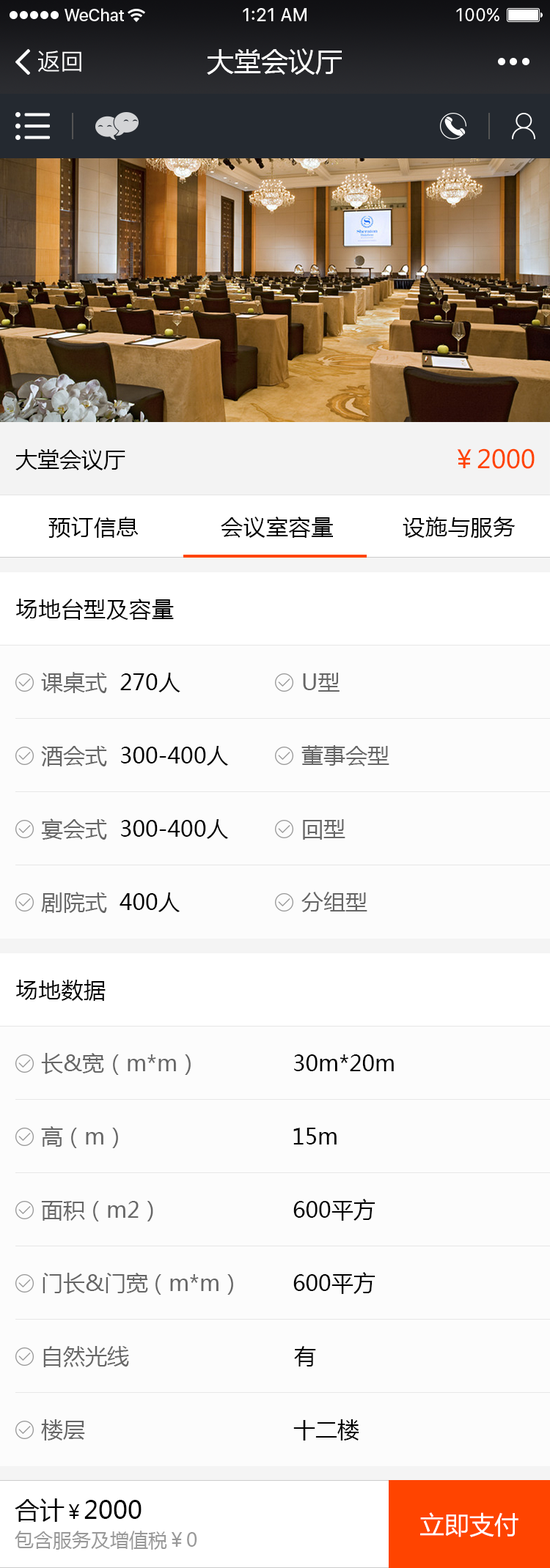
<style>
.page{position:relative;width:550px;height:1568px;background:#fcfcfc}
.page>*{position:absolute;margin:0}
.t1{font:23.4px "PingFangSC-Regular";color:#ffffff}
.t2{font:27.1px "MicrosoftYaHei";color:#ffffff}
.t3{font:22px "MicrosoftYaHei";color:#000000}
.t4{font:24.9px "MicrosoftYaHei";color:#ff4400}
.t5{font:22px "MicrosoftYaHei";letter-spacing:0.03em;color:#000000}
.t6{font:22px "MicrosoftYaHei";color:#666666}
.t7{font:19.1px/33px "MicrosoftYaHei";color:#999999}
.t8{font:24.9px/33px "MicrosoftYaHei";color:#000000}
.t9{font:19.1px/33px "MicrosoftYaHei";color:#000000}
.t10{font:24.9px "MicrosoftYaHei";color:#ffffff}
</style>
<div class="page">
<p class="t1" style="left:38px;top:51px;width:43px;height:22px">返回</p>
<p class="t2" style="left:207px;top:48px;width:134px;height:27px">大堂会议厅</p>
<p class="t3" style="left:15px;top:449px;width:110px;height:21px">大堂会议厅</p>
<p class="t4" style="left:456px;top:448px;width:78px;height:21px">￥2000</p>
<p class="t5" style="left:48px;top:517px;width:90px;height:21px">预订信息</p>
<p class="t5" style="left:221px;top:517px;width:112px;height:21px">会议室容量</p>
<p class="t5" style="left:402px;top:517px;width:113px;height:21px">设施与服务</p>
<p class="t5" style="left:16px;top:599px;width:158px;height:21px">场地台型及容量</p>
<p class="t6" style="left:41px;top:672px;width:66px;height:21px">课桌式</p>
<p class="t3" style="left:120px;top:673px;width:60px;height:19px">270人</p>
<p class="t6" style="left:303px;top:673px;width:36px;height:19px">U型</p>
<p class="t6" style="left:41px;top:746px;width:66px;height:20px">酒会式</p>
<p class="t3" style="left:121px;top:746px;width:108px;height:20px">300-400人</p>
<p class="t6" style="left:301px;top:745px;width:88px;height:21px">董事会型</p>
<p class="t6" style="left:41px;top:818px;width:66px;height:22px">宴会式</p>
<p class="t3" style="left:121px;top:819px;width:108px;height:20px">300-400人</p>
<p class="t6" style="left:303px;top:819px;width:42px;height:21px">回型</p>
<p class="t6" style="left:41px;top:892px;width:66px;height:21px">剧院式</p>
<p class="t3" style="left:119px;top:892px;width:61px;height:20px">400人</p>
<p class="t6" style="left:301px;top:892px;width:66px;height:20px">分组型</p>
<p class="t5" style="left:16px;top:980px;width:90px;height:21px">场地数据</p>
<p class="t6" style="left:41px;top:1053px;width:63px;height:21px">长&amp;宽</p>
<p class="t6" style="left:113px;top:1054px;width:78px;height:21px">（m*m）</p>
<p class="t3" style="left:294px;top:1054px;width:99px;height:17px">30m*20m</p>
<p class="t6" style="left:41px;top:1126px;width:22px;height:21px">高</p>
<p class="t6" style="left:71px;top:1128px;width:47px;height:20px">（m）</p>
<p class="t3" style="left:293px;top:1128px;width:43px;height:16px">15m</p>
<p class="t6" style="left:41px;top:1201px;width:44px;height:20px">面积</p>
<p class="t6" style="left:93px;top:1201px;width:60px;height:20px">（m2）</p>
<p class="t3" style="left:293px;top:1199px;width:82px;height:22px">600平方</p>
<p class="t6" style="left:42px;top:1273px;width:106px;height:21px">门长&amp;门宽</p>
<p class="t6" style="left:155px;top:1274px;width:78px;height:21px">（m*m）</p>
<p class="t3" style="left:293px;top:1272px;width:82px;height:22px">600平方</p>
<p class="t6" style="left:43px;top:1346px;width:86px;height:21px">自然光线</p>
<p class="t3" style="left:294px;top:1346px;width:22px;height:21px">有</p>
<p class="t6" style="left:41px;top:1419px;width:44px;height:22px">楼层</p>
<p class="t3" style="left:293px;top:1419px;width:66px;height:22px">十二楼</p>
<p class="t7" style="left:15px;top:1498px;width:182px;height:52px"><span class="t8">合计</span><span class="t9">￥</span><span class="t8">2000<br></span>包含服务及增值税￥0</p>
<p class="t10" style="left:420px;top:1512px;width:98px;height:25px">立即支付</p>
</div>
